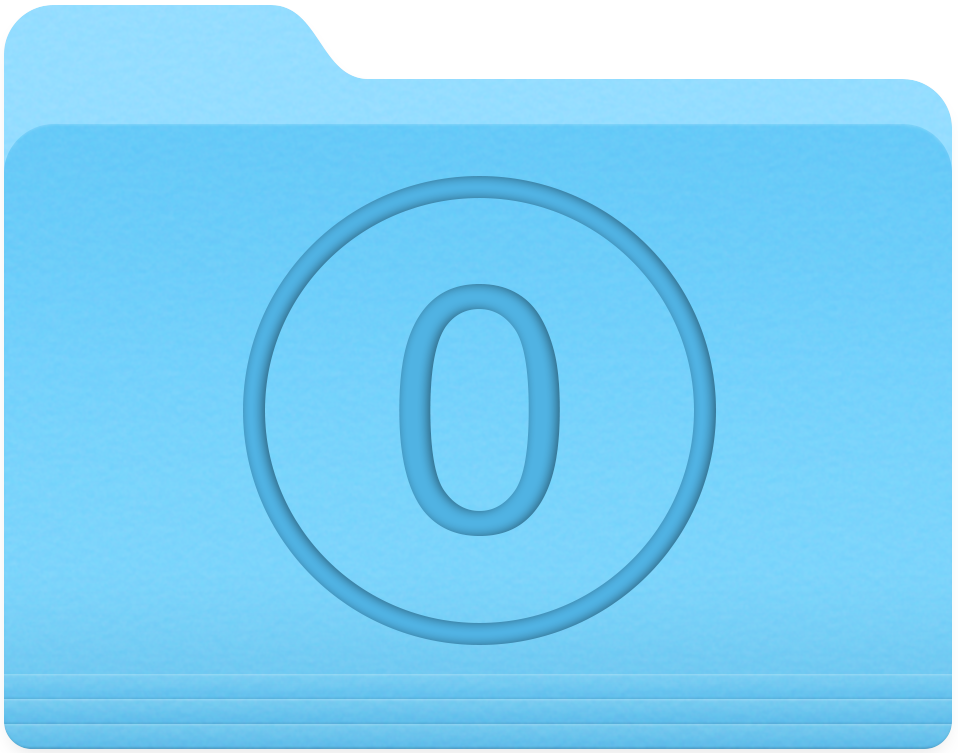
<style>
.page{position:relative;width:958px;height:753px}
.page>*{position:absolute;margin:0}
.t1{font:344px "ArialMT";color:#50b3e3}
</style>
<div class="page">
<p class="t1" style="left:399px;top:284px;width:161px;height:252px">0</p>
</div>
